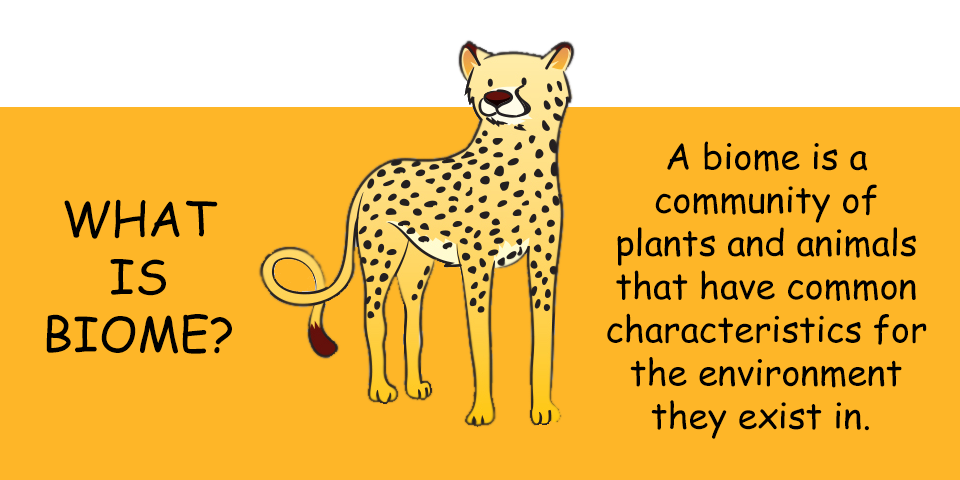
<style>
.page{position:relative;width:960px;height:480px;background:#feb628}
.page>*{position:absolute;margin:0}
.t1{font:36px "ComicSansMS";color:#000000}
.t2{font:48px "ComicSansMS";color:#000000}
</style>
<div class="page">
<p class="t1" style="left:607px;top:141px;width:320px;height:298px;text-align:center">A biome is a<br>community of<br>plants and animals<br>that have common<br>characteristics for<br>the environment<br>they exist in.</p>
<p class="t2" style="left:46px;top:199px;width:186px;height:155px;text-align:center">WHAT<br>IS<br>BIOME?</p>
</div>
